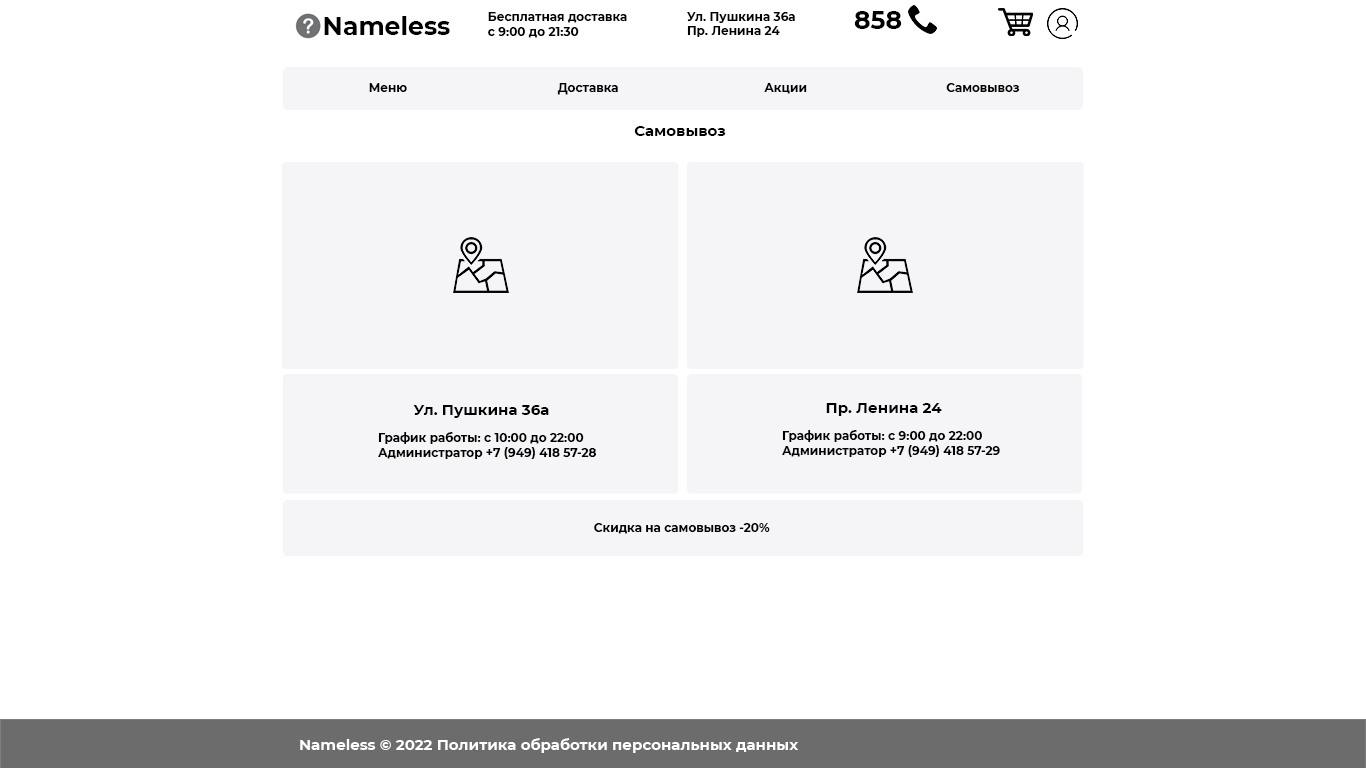
<style>
.page{position:relative;width:1366px;height:768px;background:#ffffff}
.page>*{position:absolute;margin:0}
.t1{font:25px "Montserrat-Bold";color:#000000}
.t2{font:12px "Montserrat-Bold";color:#000000}
.t3{font:15px "Montserrat-Bold";color:#010101}
.t4{font:12px "Montserrat-Bold";color:#010101}
.t5{font:15px "Montserrat-Bold";color:#ffffff}
</style>
<div class="page">
<p class="t1" style="left:324px;top:16px;width:126px;height:19px">Nameless</p>
<p class="t2" style="left:488px;top:12px;width:139px;height:26px">Бесплатная доставка<br>с 9:00 до 21:30</p>
<p class="t2" style="left:687px;top:12px;width:108px;height:25px">Ул. Пушкина 36а<br>Пр. Ленина 24</p>
<p class="t1" style="left:854px;top:11px;width:48px;height:18px">858</p>
<p class="t2" style="left:369px;top:83px;width:38px;height:9px">Меню</p>
<p class="t2" style="left:557px;top:83px;width:61px;height:12px">Доставка</p>
<p class="t2" style="left:764px;top:83px;width:43px;height:11px">Акции</p>
<p class="t2" style="left:946px;top:83px;width:74px;height:9px">Самовывоз</p>
<p class="t3" style="left:634px;top:126px;width:92px;height:10px">Самовывоз</p>
<p class="t3" style="left:413px;top:405px;width:136px;height:13px">Ул. Пушкина 36а</p>
<p class="t3" style="left:826px;top:403px;width:116px;height:13px">Пр. Ленина 24</p>
<p class="t4" style="left:378px;top:432px;width:219px;height:27px">График работы: с 10:00 до 22:00<br>Администратор +7 (949) 418 57-28</p>
<p class="t4" style="left:782px;top:430px;width:218px;height:27px">График работы: с 9:00 до 22:00<br>Администратор +7 (949) 418 57-29</p>
<p class="t4" style="left:594px;top:523px;width:176px;height:11px">Скидка на самовывоз -20%</p>
<p class="t5" style="left:300px;top:738px;width:499px;height:15px">Nameless © 2022 Политика обработки персональных данных</p>
</div>
